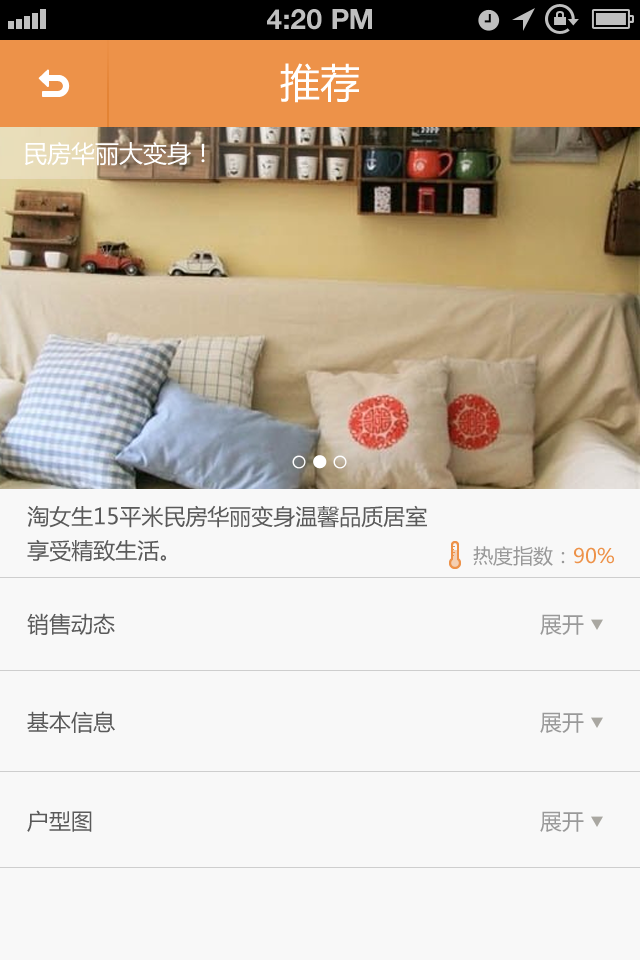
<style>
.page{position:relative;width:640px;height:960px;background:#f8f8f8}
.page>*{position:absolute;margin:0}
.t1{font:28px "HelveticaNeue-Bold";color:#bfbfbf;text-transform:uppercase}
.t2{font:40px "MicrosoftYaHei";color:#ffffff}
.t3{font:24px "MicrosoftYaHei";color:#ffffff}
.t4{font:22px/34px "MicrosoftYaHei";color:#5a5a5a}
.t5{font:20px "MicrosoftYaHei";color:#999999}
.t6{font:20px "MicrosoftYaHei";color:#ed9249}
.t7{font:22px "MicrosoftYaHei";color:#5a5a5a}
.t8{font:22px "MicrosoftYaHei";color:#999999}
</style>
<div class="page">
<p class="t1" style="left:267px;top:9px;width:105px;height:21px">4:20 PM</p>
<p class="t2" style="left:280px;top:63px;width:79px;height:40px">推荐</p>
<p class="t3" style="left:25px;top:142px;width:180px;height:24px">民房华丽大变身！</p>
<p class="t4" style="left:27px;top:505px;width:400px;height:57px">淘女生15平米民房华丽变身温馨品质居室<br>享受精致生活。</p>
<p class="t5" style="left:473px;top:546px;width:141px;height:20px">热度指数：<span class="t6">90%</span></p>
<p class="t7" style="left:27px;top:613px;width:88px;height:22px">销售动态</p>
<p class="t8" style="left:540px;top:614px;width:44px;height:21px">展开</p>
<p class="t7" style="left:27px;top:711px;width:88px;height:22px">基本信息</p>
<p class="t8" style="left:540px;top:712px;width:44px;height:21px">展开</p>
<p class="t7" style="left:27px;top:810px;width:65px;height:22px">户型图</p>
<p class="t8" style="left:540px;top:811px;width:44px;height:21px">展开</p>
</div>
